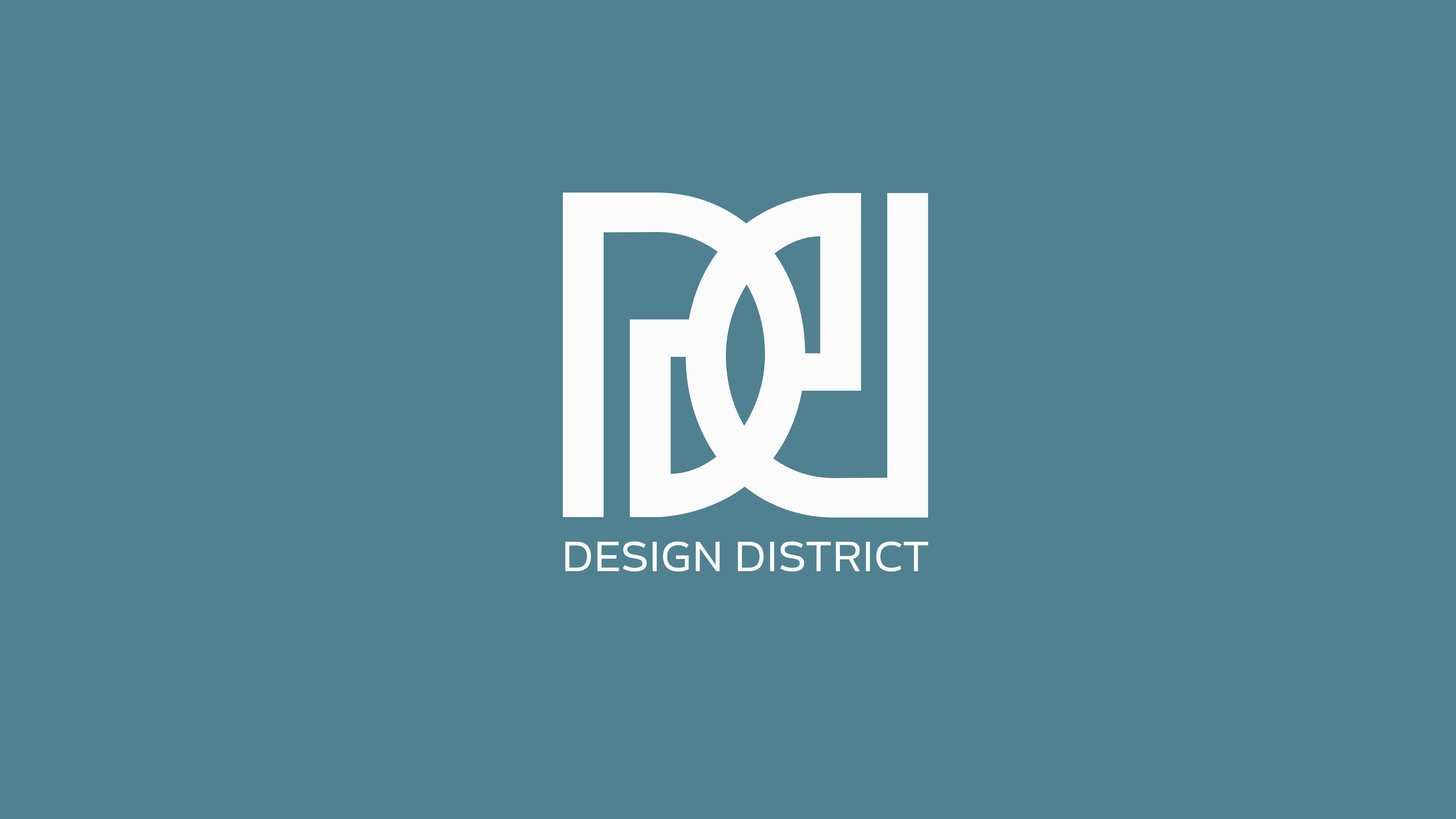
<style>
.page{position:relative;width:1456px;height:819px;background:#508190}
.page>*{position:absolute;margin:0}
.t1{font:343.1px "Grisha";color:#fbfbfb;text-transform:uppercase}
.t2{font:40.4px "Blanc-Regular";letter-spacing:0.024em;color:#fbfbfb;text-transform:uppercase}
</style>
<div class="page">
<p class="t1" style="left:563px;top:192px;width:242px;height:325px">d</p>
<p class="t1" style="left:686px;top:193px;width:242px;height:325px;rotate:180deg">d</p>
<p class="t2" style="left:565px;top:541px;width:363px;height:30px">Design District</p>
</div>
